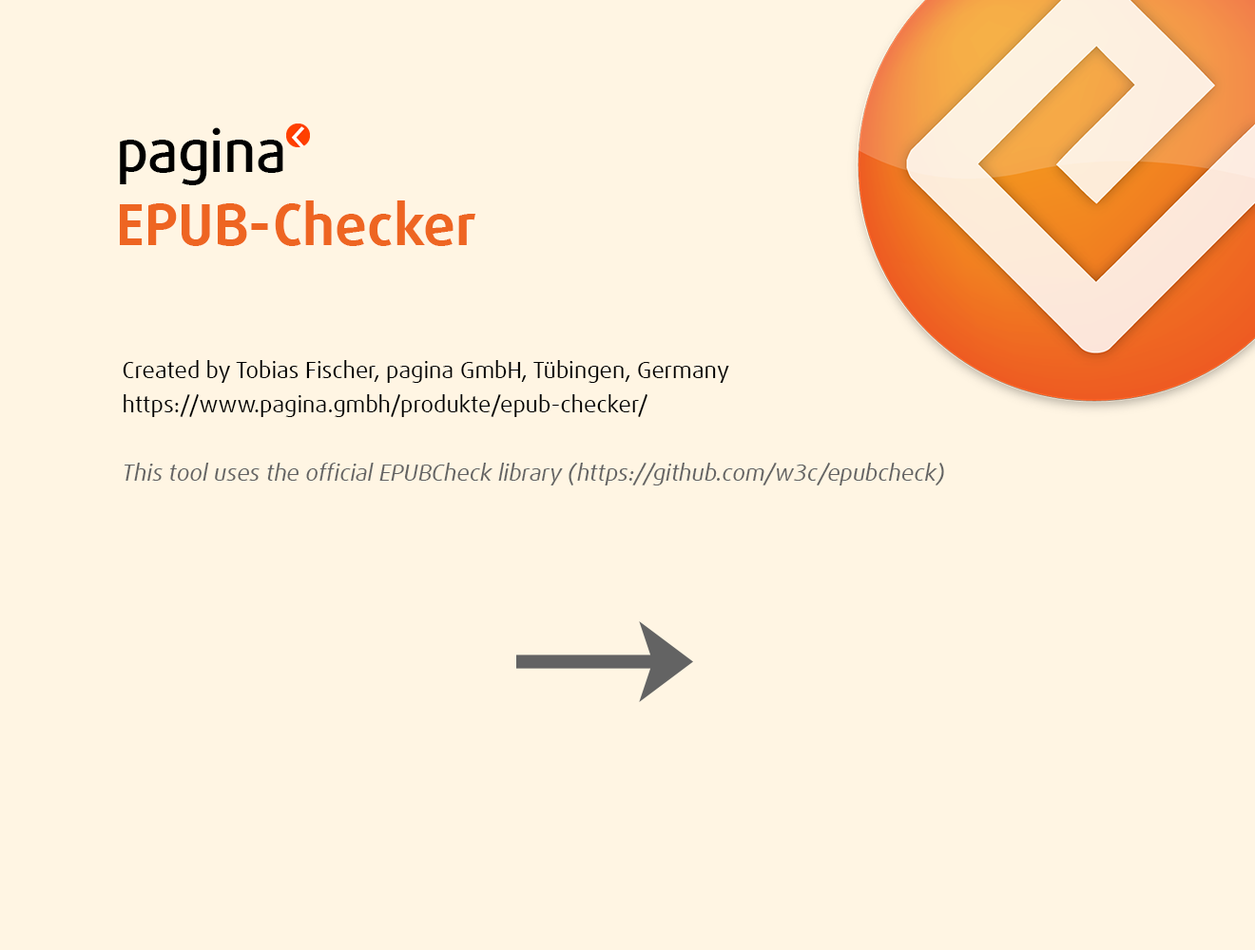
<style>
.page{position:relative;width:1255px;height:950px;background:#fff5e3}
.page>*{position:absolute;margin:0}
.t1{font:57.6px "DaxlineOffc-Medium";letter-spacing:-0.01em;color:#000000}
.t2{font:57px "DaxlineOffc-Bold";color:#ee6522}
.t3{font:22.8px/34.2px "DaxlineOffc";color:#000000}
.t4{font:22.8px/34.2px "DaxlineOffc-Italic";color:#636363}
</style>
<div class="page">
<p class="t1" style="left:120px;top:127px;width:163px;height:58px">pagina</p>
<p class="t2" style="left:120px;top:201px;width:356px;height:45px">EPUB-Checker</p>
<p class="t3" style="left:123px;top:360px;width:821px;height:126px">Created by Tobias Fischer, pagina GmbH, Tübingen, Germany<br>https://www.pagina.gmbh/produkte/epub-checker/<br><br><span class="t4">This tool uses the official EPUBCheck library (https://github.com/w3c/epubcheck)</span></p>
</div>
